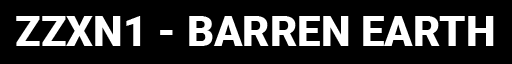
<style>
.page{position:relative;width:512px;height:64px;background:#000000}
.page>*{position:absolute;margin:0}
.t1{font:42px "Roboto-Black";color:#ffffff}
</style>
<div class="page">
<p class="t1" style="left:16px;top:16px;width:478px;height:30px">ZZXN1 - BARREN EARTH</p>
</div>
